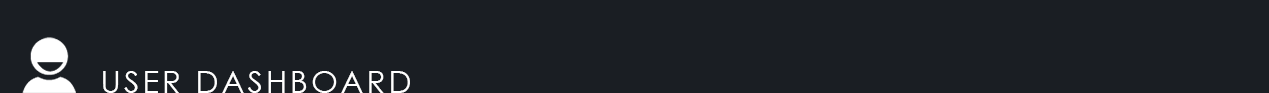
<style>
.page{position:relative;width:1269px;height:93px;background:#1a1e23}
.page>*{position:absolute;margin:0}
.t1{font:30.7px "CenturyGothic";letter-spacing:0.1em;color:#ffffff}
</style>
<div class="page">
<p class="t1" style="left:103px;top:71px;width:307px;height:22px">USER DASHBOARD</p>
</div>
